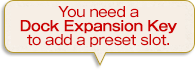
<style>
.page{position:relative;width:195px;height:70px;background:#f6eee5}
.page>*{position:absolute;margin:0}
.t1{font:14px/14px "GothicMB101Pro-Medium";letter-spacing:-0.04em;color:#cc0000}
.t2{font:14px/14px "GothicMB101Pro-Medium";letter-spacing:-0.04em;color:#cc0000;font-weight:bold}
</style>
<div class="page">
<p class="t1" style="left:20px;top:6px;width:157px;height:41px;text-align:center">You need a<br><span class="t2">Dock Expansion Key<br></span>to add a preset slot.</p>
</div>
